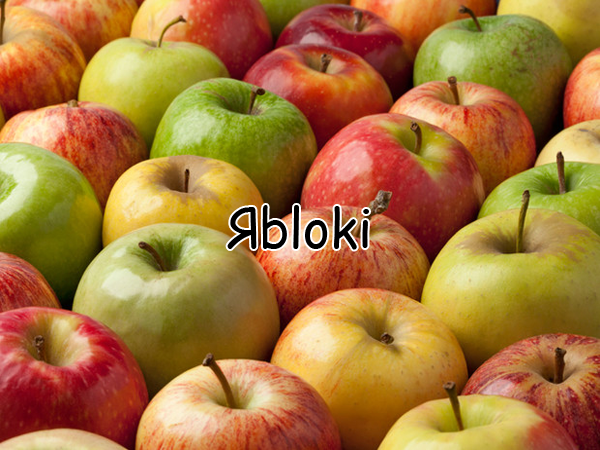
<style>
.page{position:relative;width:600px;height:450px}
.page>*{position:absolute;margin:0}
.t1{font:54.4px "ComicSansMS";color:#000000;scale:0.94 1}
</style>
<div class="page">
<p class="t1" style="left:227px;top:205px;width:142px;height:45px">Яbloki</p>
</div>
